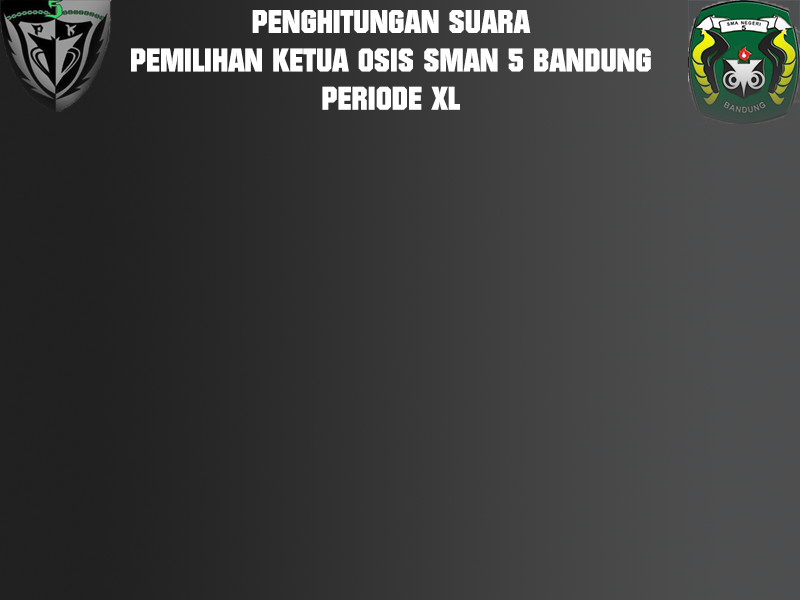
<style>
.page{position:relative;width:800px;height:600px}
.page>*{position:absolute;margin:0}
.t1{font:32px "Autumn";color:#ffffff}
</style>
<div class="page">
<p class="t1" style="left:131px;top:10px;width:520px;height:100px;text-align:center">PENGHITUNGAN SUARA<br>PEMILIHAN KETUA OSIS SMAN 5 BANDUNG<br>PERIODE XL</p>
</div>
